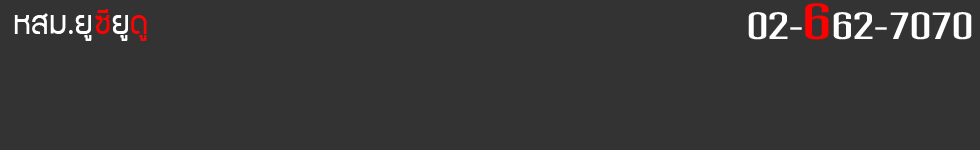
<style>
.page{position:relative;width:980px;height:150px;background:#333333}
.page>*{position:absolute;margin:0}
.t1{font:36px "XDB-PatpongExtended";letter-spacing:0.005em;color:#fefefe}
.t2{font:48px "XDB-PatpongExtended";letter-spacing:0.005em;color:#ff0000}
.t3{font:36px "supermarket";letter-spacing:0.005em;color:#ffffff}
.t4{font:36px "supermarket";letter-spacing:0.005em;color:#ff0000}
.t5{font:36px "supermarket";letter-spacing:0.005em;color:#fe0303}
</style>
<div class="page">
<p class="t1" style="left:748px;top:3px;width:224px;height:37px">02-<span class="t2">6</span>62-7070</p>
<p class="t3" style="left:14px;top:9px;width:133px;height:32px">หสม.ยู<span class="t4">ซี</span>ยู<span class="t5">ดู</span></p>
</div>
